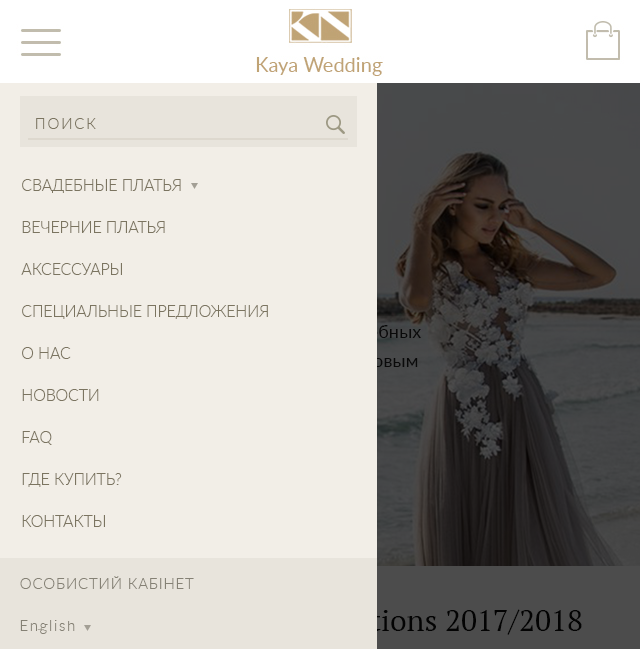
<style>
.page{position:relative;width:640px;height:649px;background:#f2eee7}
.page>*{position:absolute;margin:0}
.t1{font:15px "Lato-Light";letter-spacing:0.12em;color:#7b7460;text-transform:uppercase}
.t2{font:16px/42px "Lato-Light";color:#7b7460;text-transform:uppercase}
.t3{font:15px "Lato-Light";letter-spacing:0.05em;color:#858175;text-transform:uppercase}
.t4{font:15px "Lato-Light";letter-spacing:0.12em;color:#858175}
</style>
<div class="page">
<p class="t1" style="left:36px;top:118px;width:60px;height:11px">поиск</p>
<p class="t2" style="left:21px;top:179px;width:247px;height:348px">Свадебные платья<br>Вечерние платья<br>Аксессуары<br>Специальные предложения<br>О нас<br>Новости<br>FAQ<br>Где купить?<br>Контакты</p>
<p class="t3" style="left:20px;top:576px;width:174px;height:13px">Особистий кабінет</p>
<p class="t4" style="left:20px;top:620px;width:55px;height:14px">English</p>
</div>
